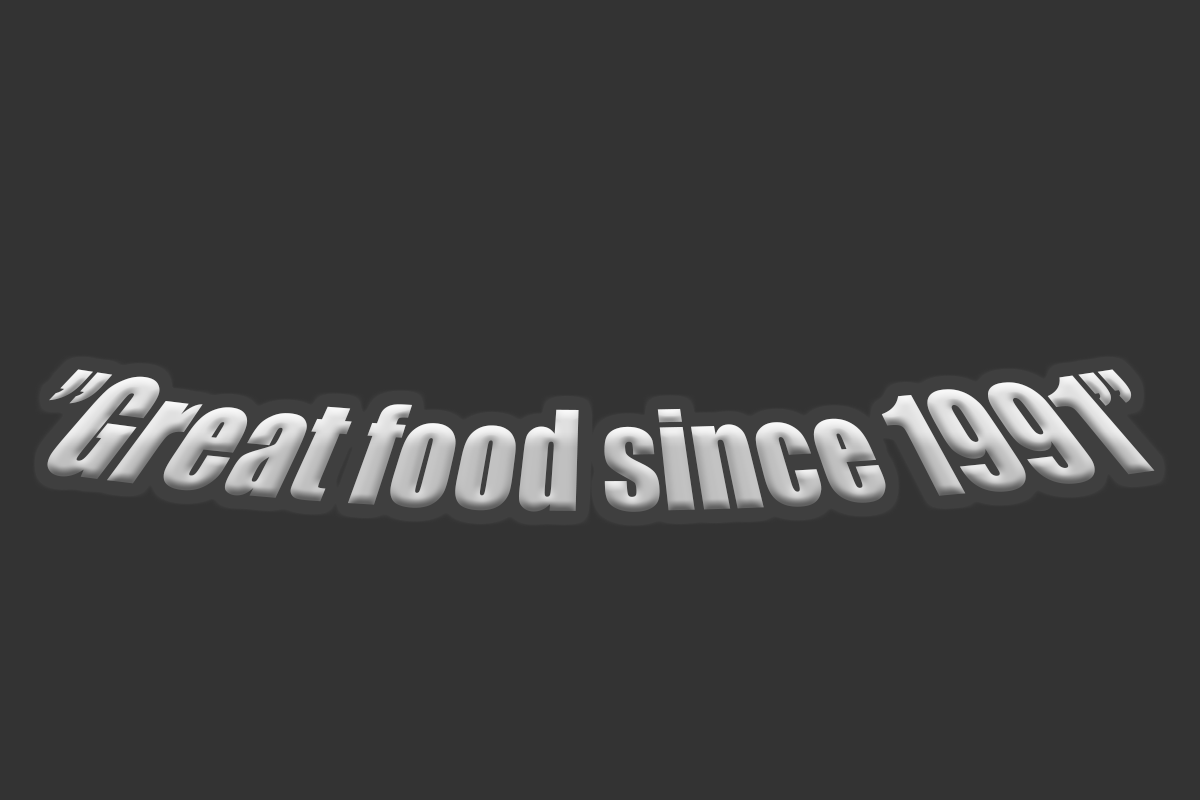
<style>
.page{position:relative;width:1200px;height:800px;background:#333333}
.page>*{position:absolute;margin:0}
.t1{font:120px "Impact"}
</style>
<div class="page">
<p class="t1" style="left:47px;top:369px;width:1108px;height:143px">”Great food since 1991”</p>
</div>
